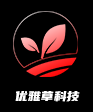
<style>
.page{position:relative;width:93px;height:112px;background:#000000}
.page>*{position:absolute;margin:0}
.t1{font:14px "YouSheBiaoTiHei";color:#ffffff}
</style>
<div class="page">
<p class="t1" style="left:15px;top:91px;width:65px;height:11px">优雅草科技</p>
</div>
